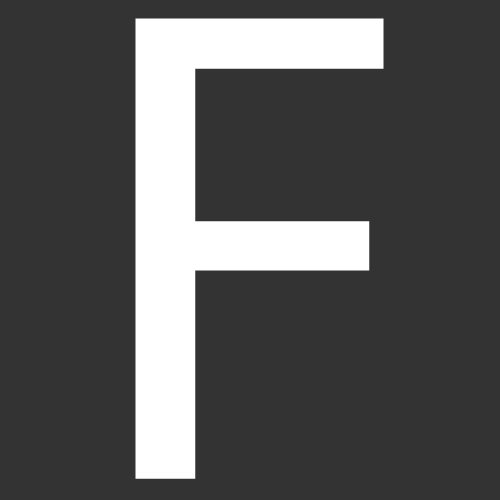
<style>
.page{position:relative;width:500px;height:500px;background:#333333}
.page>*{position:absolute;margin:0}
.t1{font:682.2px "MyriadPro-Regular";color:#ffffff}
</style>
<div class="page">
<p class="t1" style="left:135px;top:18px;width:249px;height:461px">F</p>
</div>
